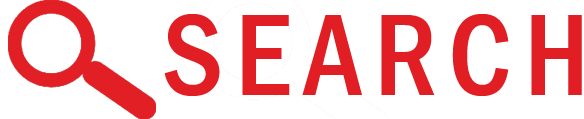
<style>
.page{position:relative;width:584px;height:119px;background:#ffffff}
.page>*{position:absolute;margin:0}
.t1{font:120px "FranklinGothic-MediumCond";letter-spacing:0.1em;color:#e21e25}
</style>
<div class="page">
<p class="t1" style="left:164px;top:14px;width:418px;height:82px">SEARCH</p>
</div>
